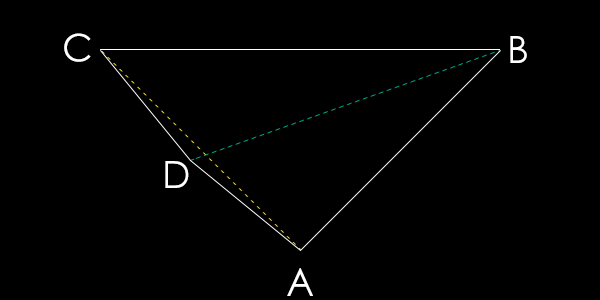
<style>
.page{position:relative;width:600px;height:300px;background:#000000}
.page>*{position:absolute;margin:0}
.t1{font:37.5px "STHeiti";color:#ffffff}
</style>
<div class="page">
<p class="t1" style="left:64px;top:33px;width:27px;height:29px">C</p>
<p class="t1" style="left:510px;top:36px;width:17px;height:27px">B</p>
<p class="t1" style="left:165px;top:161px;width:24px;height:27px">D</p>
<p class="t1" style="left:287px;top:268px;width:26px;height:28px">A</p>
</div>
